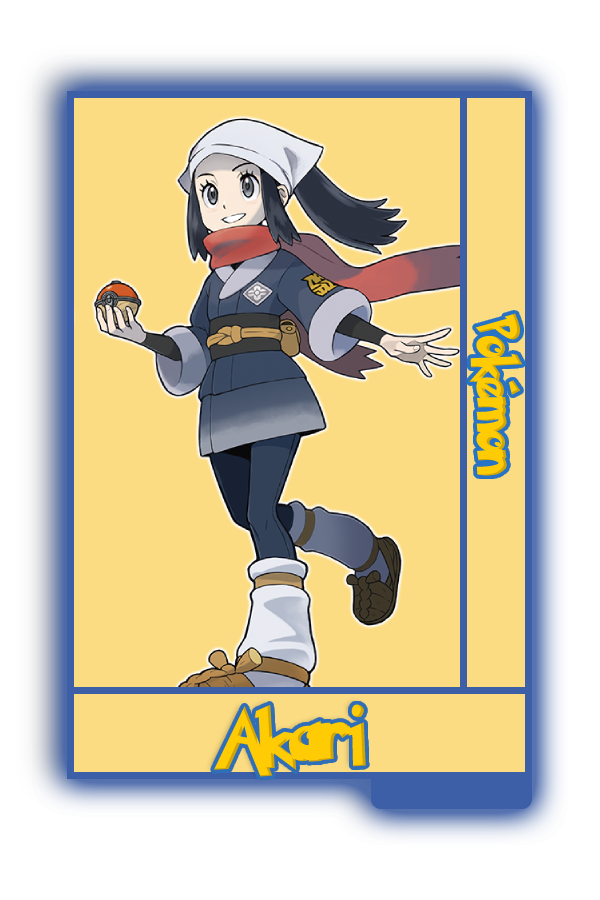
<style>
.page{position:relative;width:600px;height:900px;background:#fbdc83}
.page>*{position:absolute;margin:0}
.t1{font:48.8px "PokemonSolidNormal";color:#ffcb05;scale:0.8 1}
.t2{font:60.1px "PokemonSolidNormal";color:#ffcb05;scale:0.96 1}
</style>
<div class="page">
<p class="t1" style="left:469px;top:313px;width:54px;height:163px;rotate:90deg">Pokémon</p>
<p class="t2" style="left:213px;top:704px;width:153px;height:73px">Akari</p>
</div>
